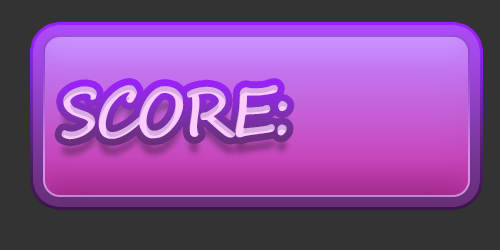
<style>
.page{position:relative;width:500px;height:250px;background:#333333}
.page>*{position:absolute;margin:0}
.t1{font:69.7px "SegoeScript-Bold";letter-spacing:-0.06em;scale:0.87 1}
</style>
<div class="page">
<p class="t1" style="left:61px;top:85px;width:227px;height:55px">SCORE:</p>
</div>
